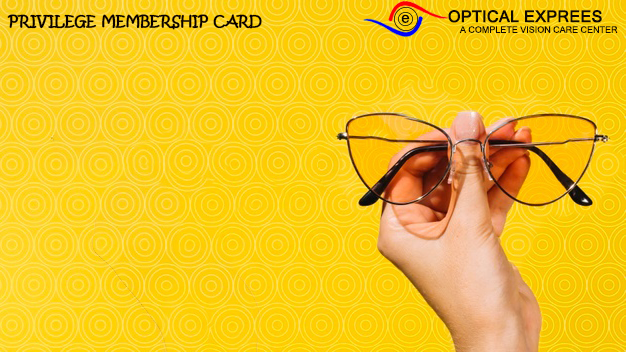
<style>
.page{position:relative;width:626px;height:352px}
.page>*{position:absolute;margin:0}
.t1{font:14px "KristenITC-Regular";color:#0c0101;font-variant:small-caps;font-weight:bold}
.t2{font:14.9px "MicrosoftSansSerif";color:#080606}
.t3{font:9px "MicrosoftSansSerif";color:#120904;font-variant:small-caps}
.t4{font:16px "MicrosoftSansSerif";color:#120904;font-variant:small-caps;font-weight:bold}
</style>
<div class="page">
<p class="t1" style="left:7px;top:14px;width:255px;height:16px">PRIVILEGE MEMBERSHIP CARD</p>
<p class="t2" style="left:401px;top:14px;width:9px;height:9px">e</p>
<p class="t3" style="left:448px;top:10px;width:170px;height:23px"><span class="t4">OPTICAL EXPREES <br></span>     A COMPLETE VISION CARE CENTER</p>
</div>
